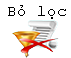
<style>
.page{position:relative;width:71px;height:58px;background:#ffffff}
.page>*{position:absolute;margin:0}
.t1{font:12px "CourierNewPSMT";color:#000000}
</style>
<div class="page">
<p class="t1" style="left:8px;top:5px;width:58px;height:14px">Bỏ lọc</p>
</div>
